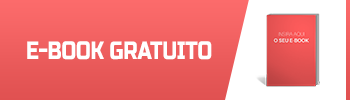
<style>
.page{position:relative;width:350px;height:100px;background:#ffffff}
.page>*{position:absolute;margin:0}
.t1{font:25px "RussoOne-Regular";letter-spacing:-0.01em;color:#ffffff;scale:0.8 1}
</style>
<div class="page">
<p class="t1" style="left:27px;top:41px;width:185px;height:19px">E-BOOK GRATUITO</p>
</div>
